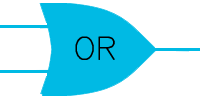
<style>
.page{position:relative;width:200px;height:100px;background:#ffffff}
.page>*{position:absolute;margin:0}
.t1{font:30px "SWSimp";color:#000000}
</style>
<div class="page">
<p class="t1" style="left:75px;top:36px;width:40px;height:24px">OR</p>
</div>
